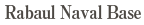
<style>
.page{position:relative;width:144px;height:25px;background:#ffffff}
.page>*{position:absolute;margin:0}
.t1{font:18px "RyuminPro-ExBold";letter-spacing:-0.04em;color:#4c4843;scale:0.9 1}
</style>
<div class="page">
<p class="t1" style="left:5px;top:5px;width:136px;height:15px">Rabaul Naval Base</p>
</div>
